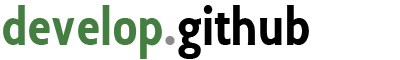
<style>
.page{position:relative;width:400px;height:60px;background:#ffffff}
.page>*{position:absolute;margin:0}
.t1{font:60px "Collegiate";color:#447e40}
.t2{font:60px "Collegiate";color:#8c8c8c}
.t3{font:60px "Collegiate";color:#000000}
</style>
<div class="page">
<p class="t1" style="left:3px;top:5px;width:306px;height:54px">develop<span class="t2">.</span><span class="t3">github</span></p>
</div>
